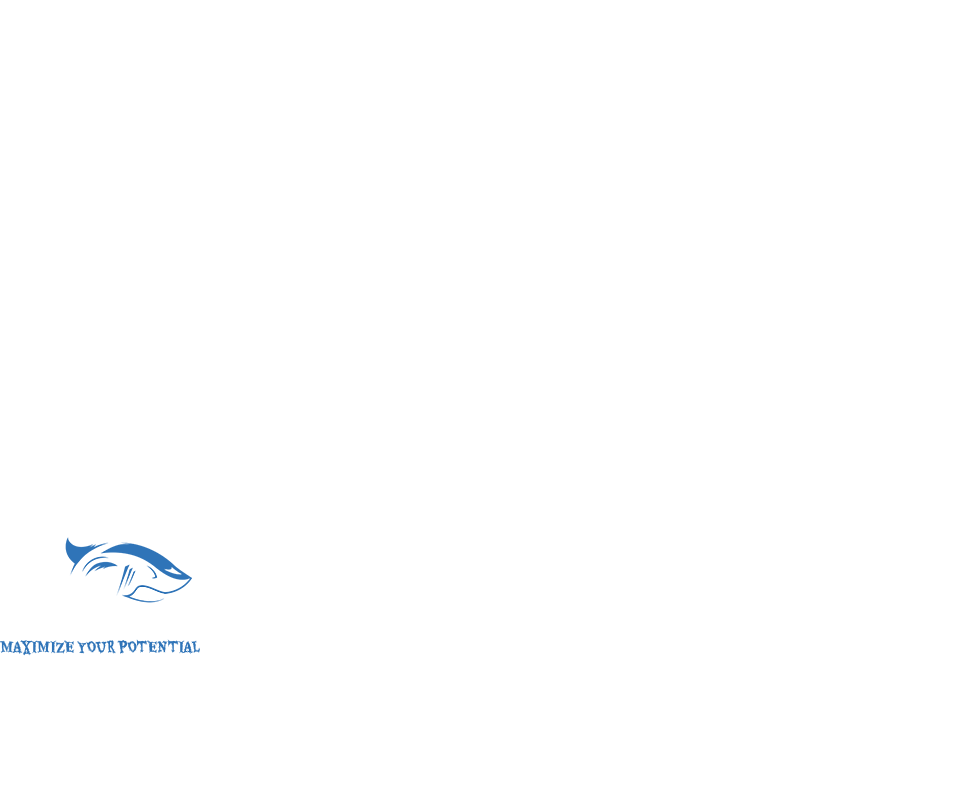
<style>
.page{position:relative;width:960px;height:800px;background:#ffffff}
.page>*{position:absolute;margin:0}
.t1{font:14.6px "Eater-Regular";letter-spacing:-0.03em;color:#2f74b8}
</style>
<div class="page">
<p class="t1" style="left:0px;top:639px;width:200px;height:17px">MAXIMIZE YOUR POTENTIAL</p>
</div>
